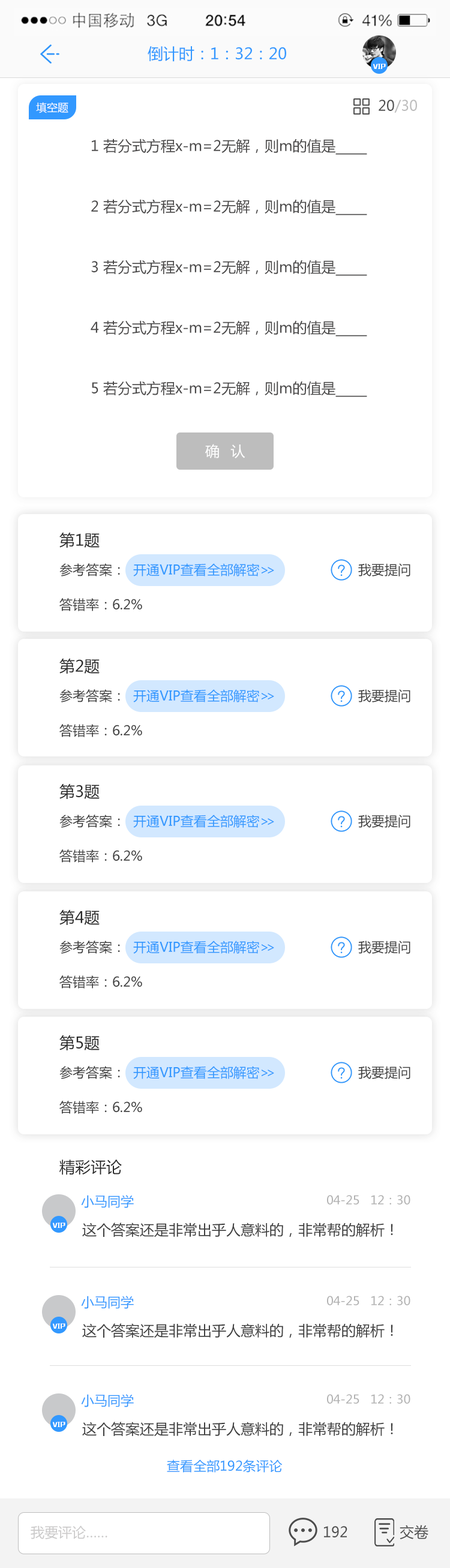
<style>
.page{position:relative;width:450px;height:1568px;background:#ffffff}
.page>*{position:absolute;margin:0}
.t1{font:15.6px "MicrosoftYaHei";color:#3298ff}
.t2{font:5.6px "MFLiHei_Noncommercial-Regular";color:#ffffff}
.t3{font:10.8px "MicrosoftYaHei";color:#ffffff}
.t4{font:14.4px "MicrosoftYaHei";color:#bdbdbd}
.t5{font:14.4px "MicrosoftYaHei";color:#4e4e4e}
.t6{font:14.4px "MicrosoftYaHei";color:#4b4a4a}
.t7{font:14.4px "MicrosoftYaHei";letter-spacing:0.24em;color:#ffffff}
.t8{font:15.6px "MicrosoftYaHei";color:#292929}
.t9{font:13.2px "MicrosoftYaHei";color:#3298ff}
.t10{font:13.2px "MicrosoftYaHei";color:#3e3e3e}
.t11{font:13.2px "MicrosoftYaHei";letter-spacing:-0.26em;color:#3298ff}
.t12{font:12px "MicrosoftYaHei";color:#b2b2b2}
.t13{font:14.4px "MicrosoftYaHei";color:#3e3e3e}
.t14{font:13.8px "MicrosoftYaHei";color:#cbcaca}
</style>
<div class="page">
<p class="t1" style="left:148px;top:46px;width:138px;height:16px">倒计时：1：32：20</p>
<p class="t2" style="left:373px;top:64px;width:13px;height:5px">VIP</p>
<p class="t3" style="left:36px;top:102px;width:32px;height:11px">填空题</p>
<p class="t4" style="left:379px;top:100px;width:38px;height:13px"><span class="t5">20</span>/30</p>
<p class="t6" style="left:92px;top:139px;width:275px;height:16px">1 若分式方程x-m=2无解，则m的值是——</p>
<p class="t6" style="left:91px;top:199px;width:276px;height:16px">2 若分式方程x-m=2无解，则m的值是——</p>
<p class="t6" style="left:91px;top:260px;width:276px;height:16px">3 若分式方程x-m=2无解，则m的值是——</p>
<p class="t6" style="left:91px;top:320px;width:276px;height:17px">4 若分式方程x-m=2无解，则m的值是——</p>
<p class="t6" style="left:92px;top:381px;width:275px;height:16px">5 若分式方程x-m=2无解，则m的值是——</p>
<p class="t7" style="left:205px;top:444px;width:40px;height:14px">确 认</p>
<p class="t8" style="left:59px;top:533px;width:41px;height:15px">第1题</p>
<p class="t9" style="left:59px;top:563px;width:215px;height:13px"><span class="t10">参考答案：  </span>开通VIP查看全部解密<span class="t11">&gt;&gt;</span></p>
<p class="t10" style="left:358px;top:563px;width:52px;height:13px">我要提问</p>
<p class="t10" style="left:59px;top:598px;width:83px;height:13px">答错率：6.2%</p>
<p class="t8" style="left:59px;top:659px;width:41px;height:15px">第2题</p>
<p class="t9" style="left:59px;top:689px;width:215px;height:13px"><span class="t10">参考答案：  </span>开通VIP查看全部解密<span class="t11">&gt;&gt;</span></p>
<p class="t10" style="left:358px;top:689px;width:52px;height:13px">我要提问</p>
<p class="t10" style="left:59px;top:724px;width:83px;height:13px">答错率：6.2%</p>
<p class="t8" style="left:59px;top:784px;width:41px;height:16px">第3题</p>
<p class="t9" style="left:59px;top:815px;width:215px;height:13px"><span class="t10">参考答案：  </span>开通VIP查看全部解密<span class="t11">&gt;&gt;</span></p>
<p class="t10" style="left:358px;top:815px;width:52px;height:13px">我要提问</p>
<p class="t10" style="left:59px;top:849px;width:83px;height:14px">答错率：6.2%</p>
<p class="t8" style="left:59px;top:910px;width:41px;height:16px">第4题</p>
<p class="t9" style="left:59px;top:941px;width:215px;height:13px"><span class="t10">参考答案：  </span>开通VIP查看全部解密<span class="t11">&gt;&gt;</span></p>
<p class="t10" style="left:358px;top:941px;width:52px;height:13px">我要提问</p>
<p class="t10" style="left:59px;top:975px;width:83px;height:14px">答错率：6.2%</p>
<p class="t8" style="left:59px;top:1035px;width:41px;height:16px">第5题</p>
<p class="t9" style="left:59px;top:1066px;width:215px;height:13px"><span class="t10">参考答案：  </span>开通VIP查看全部解密<span class="t11">&gt;&gt;</span></p>
<p class="t10" style="left:358px;top:1066px;width:52px;height:13px">我要提问</p>
<p class="t10" style="left:59px;top:1101px;width:83px;height:13px">答错率：6.2%</p>
<p class="t8" style="left:59px;top:1160px;width:63px;height:15px">精彩评论</p>
<p class="t9" style="left:81px;top:1195px;width:53px;height:13px">小马同学</p>
<p class="t12" style="left:327px;top:1195px;width:83px;height:9px">04-25   12：30</p>
<p class="t2" style="left:52px;top:1222px;width:13px;height:6px">VIP</p>
<p class="t13" style="left:82px;top:1222px;width:311px;height:15px">这个答案还是非常出乎人意料的，非常帮的解析！</p>
<p class="t9" style="left:81px;top:1296px;width:53px;height:13px">小马同学</p>
<p class="t12" style="left:327px;top:1296px;width:83px;height:9px">04-25   12：30</p>
<p class="t2" style="left:52px;top:1323px;width:13px;height:6px">VIP</p>
<p class="t13" style="left:82px;top:1323px;width:311px;height:15px">这个答案还是非常出乎人意料的，非常帮的解析！</p>
<p class="t9" style="left:81px;top:1394px;width:53px;height:13px">小马同学</p>
<p class="t12" style="left:327px;top:1394px;width:83px;height:10px">04-25   12：30</p>
<p class="t2" style="left:52px;top:1422px;width:13px;height:5px">VIP</p>
<p class="t13" style="left:82px;top:1422px;width:311px;height:15px">这个答案还是非常出乎人意料的，非常帮的解析！</p>
<p class="t9" style="left:167px;top:1459px;width:116px;height:14px">查看全部192条评论</p>
<p class="t14" style="left:31px;top:1525px;width:76px;height:14px">我要评论……</p>
<p class="t5" style="left:324px;top:1526px;width:23px;height:11px">192</p>
<p class="t5" style="left:399px;top:1525px;width:29px;height:14px">交卷</p>
</div>
